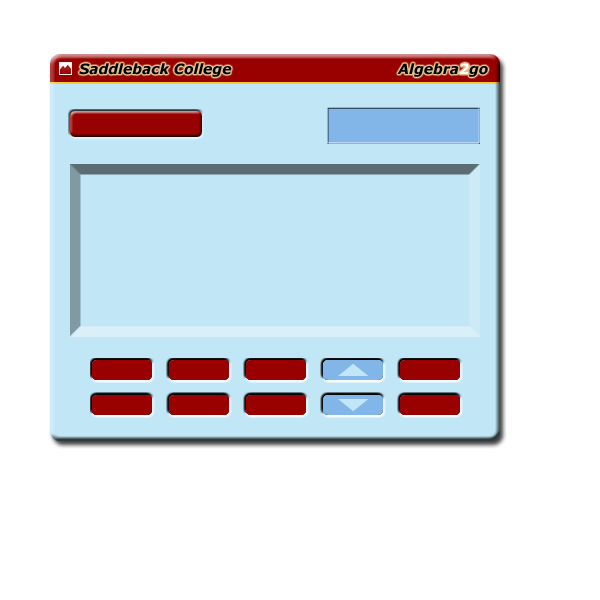
<style>
.page{position:relative;width:600px;height:600px;background:#ffffff}
.page>*{position:absolute;margin:0}
.t1{font:14px "Verdana-BoldItalic";color:#000000}
.t2{font:14px "Verdana-BoldItalic";color:#ffffff}
</style>
<div class="page">
<p class="t1" style="left:79px;top:63px;width:153px;height:14px">Saddleback College</p>
<p class="t1" style="left:397px;top:63px;width:91px;height:14px">Algebra<span class="t2">2</span>go</p>
</div>
